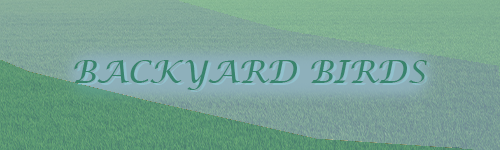
<style>
.page{position:relative;width:500px;height:150px}
.page>*{position:absolute;margin:0}
.t1{font:32px "LucidaCalligraphy-Italic";color:#39846d}
</style>
<div class="page">
<p class="t1" style="left:74px;top:60px;width:353px;height:30px">BACKYARD BIRDS</p>
</div>
